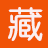
<style>
.page{position:relative;width:48px;height:48px;background:#f05307}
.page>*{position:absolute;margin:0}
.t1{font:36px "STYuanti-SC-Regular";color:#faf0f0}
</style>
<div class="page">
<p class="t1" style="left:8px;top:7px;width:35px;height:34px">藏</p>
</div>
